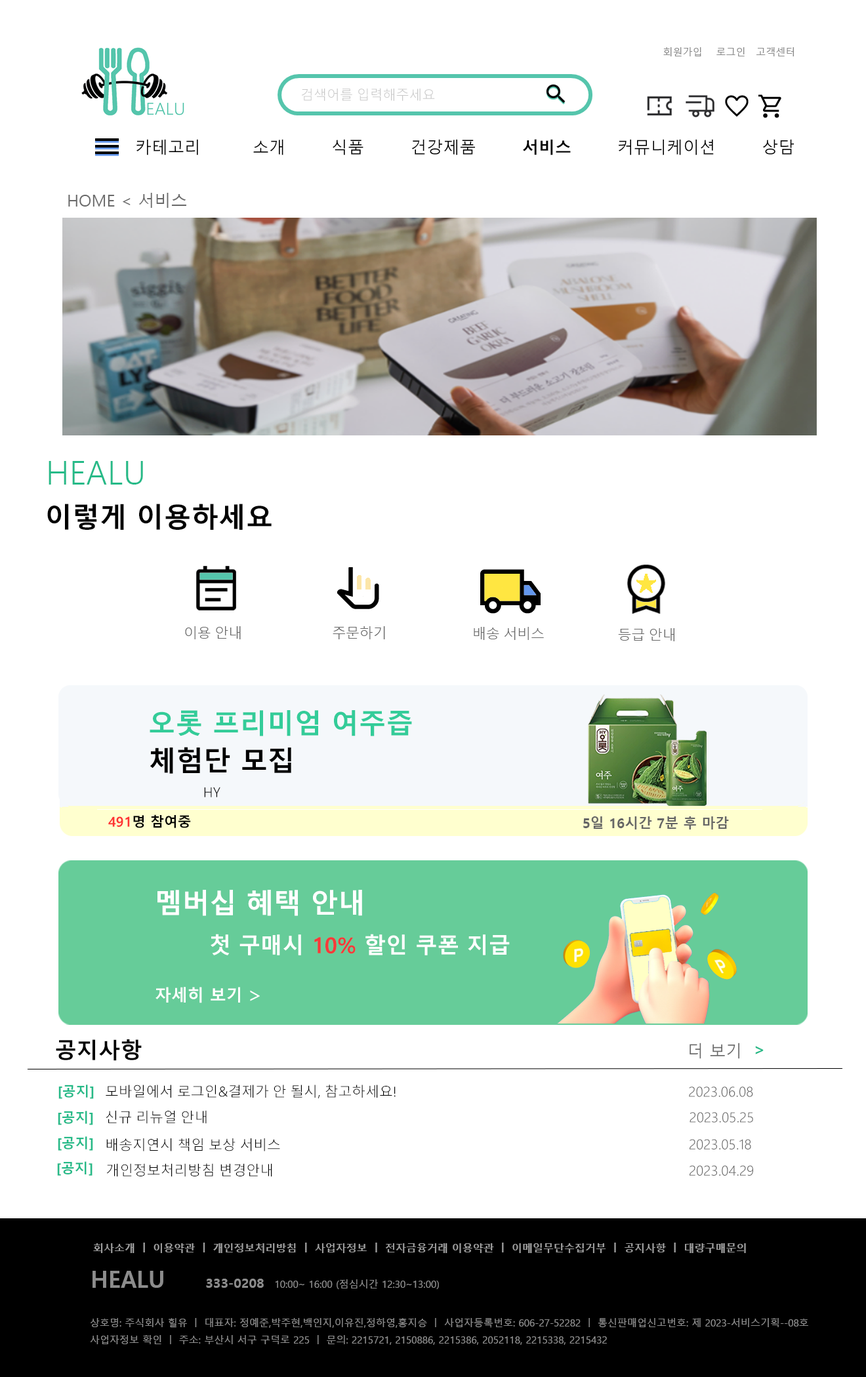
<style>
.page{position:relative;width:866px;height:1377px;background:#ffffff}
.page>*{position:absolute;margin:0}
.t1{font:9.8px "MalgunGothic";color:#8c8c8c}
.t2{font:13.1px "MalgunGothic-Semilight";color:#c8c8c8}
.t3{font:16.4px "MalgunGothic";color:#000000}
.t4{font:16.4px "MalgunGothicBold";color:#000000}
.t5{font:16.4px "MalgunGothic";color:#696969}
.t6{font:32.8px "MalgunGothic-Semilight";color:#26ba88}
.t7{font:27.3px "MalgunGothicBold";color:#000000}
.t8{font:13.7px "MalgunGothic-Semilight";color:#696969}
.t9{font:27.3px "MalgunGothicBold";color:#33cc99}
.t10{font:13.7px "MalgunGothic-Semilight";color:#000000}
.t11{font:13.7px "MalgunGothicBold";color:#000000}
.t12{font:13.7px "MalgunGothicBold";color:#ff3333}
.t13{font:13.7px "MalgunGothicBold";color:#666666}
.t14{font:27.3px "MalgunGothicBold";color:#ffffff}
.t15{font:21.9px "MalgunGothicBold";color:#ffffff}
.t16{font:21.9px "MalgunGothicBold";color:#f53a3a}
.t17{font:16.4px "MalgunGothicBold";color:#ffffff}
.t18{font:21.9px "MalgunGothic";color:#ffffff}
.t19{font:21.9px "MalgunGothicBold";color:#000000}
.t20{font:16.4px "MalgunGothicBold";color:#26ba88}
.t21{font:13.7px "MalgunGothicBold";color:#26ba88}
.t22{font:10.5px "MalgunGothicBold";color:#9d9d9d}
.t23{font:23px "MalgunGothicBold";color:#8c8c8c}
.t24{font:13.1px "MalgunGothicBold";color:#8c8c8c}
</style>
<div class="page">
<p class="t1" style="left:663px;top:47px;width:131px;height:9px">회원가입    로그인   고객센터</p>
<p class="t2" style="left:301px;top:88px;width:134px;height:13px">검색어를 입력해주세요</p>
<p class="t3" style="left:136px;top:139px;width:658px;height:16px">카테고리         소개        식품        건강제품        <span class="t4">서비스</span>        커뮤니케이션        상담</p>
<p class="t5" style="left:68px;top:193px;width:118px;height:15px">HOME &lt; 서비스</p>
<p class="t6" style="left:49px;top:461px;width:94px;height:24px">HEALU</p>
<p class="t7" style="left:47px;top:504px;width:225px;height:26px">이렇게 이용하세요</p>
<p class="t8" style="left:185px;top:626px;width:56px;height:13px">이용 안내</p>
<p class="t8" style="left:333px;top:626px;width:52px;height:13px">주문하기</p>
<p class="t8" style="left:474px;top:627px;width:70px;height:13px">배송 서비스</p>
<p class="t8" style="left:618px;top:628px;width:56px;height:13px">등급 안내</p>
<p class="t9" style="left:150px;top:710px;width:262px;height:27px">오롯 프리미엄 여주즙</p>
<p class="t7" style="left:150px;top:747px;width:141px;height:27px">체험단 모집</p>
<p class="t10" style="left:204px;top:787px;width:16px;height:11px">HY</p>
<p class="t11" style="left:108px;top:815px;width:83px;height:13px"><span class="t12">491</span>명 참여중</p>
<p class="t13" style="left:583px;top:817px;width:146px;height:13px">5일 16시간 7분 후 마감</p>
<p class="t14" style="left:157px;top:890px;width:205px;height:26px">멤버십 혜택 안내</p>
<p class="t15" style="left:211px;top:934px;width:299px;height:22px">첫 구매시 <span class="t16">10%</span> 할인 쿠폰 지급</p>
<p class="t17" style="left:155px;top:987px;width:85px;height:16px">자세히 보기</p>
<p class="t18" style="left:250px;top:990px;width:10px;height:12px">&gt;</p>
<p class="t19" style="left:56px;top:1040px;width:86px;height:21px">공지사항</p>
<p class="t5" style="left:689px;top:1043px;width:50px;height:16px">더 보기</p>
<p class="t20" style="left:755px;top:1046px;width:8px;height:9px">&gt;</p>
<p class="t21" style="left:58px;top:1085px;width:36px;height:14px">[공지]</p>
<p class="t10" style="left:106px;top:1085px;width:289px;height:14px">모바일에서 로그인&amp;결제가 안 될시, 참고하세요!</p>
<p class="t8" style="left:689px;top:1087px;width:64px;height:10px">2023.06.08</p>
<p class="t21" style="left:58px;top:1111px;width:35px;height:14px">[공지]</p>
<p class="t10" style="left:106px;top:1110px;width:101px;height:14px">신규 리뉴얼 안내</p>
<p class="t8" style="left:689px;top:1112px;width:64px;height:11px">2023.05.25</p>
<p class="t21" style="left:58px;top:1137px;width:35px;height:14px">[공지]</p>
<p class="t10" style="left:106px;top:1139px;width:174px;height:13px">배송지연시 책임 보상 서비스</p>
<p class="t8" style="left:689px;top:1139px;width:62px;height:11px">2023.05.18</p>
<p class="t21" style="left:57px;top:1162px;width:35px;height:14px">[공지]</p>
<p class="t10" style="left:106px;top:1164px;width:166px;height:13px">개인정보처리방침 변경안내</p>
<p class="t8" style="left:689px;top:1165px;width:64px;height:11px">2023.04.29</p>
<p class="t22" style="left:93px;top:1243px;width:653px;height:10px">회사소개 ㅣ 이용약관 ㅣ 개인정보처리방침 ㅣ 사업자정보 ㅣ 전자금융거래 이용약관 ㅣ 이메일무단수집거부 ㅣ 공지사항 ㅣ 대량구매문의</p>
<p class="t1" style="left:92px;top:1271px;width:347px;height:18px"><span class="t23">HEALU     </span><span class="t24">333-0208</span>   10:00~ 16:00 (점심시간 12:30~13:00)</p>
<p class="t1" style="left:90px;top:1318px;width:718px;height:27px">상호명: 주식회사 힐유 ㅣ 대표자: 정예준,박주현,백인지,이유진,정하영,홍지승 ㅣ 사업자등록번호: 606-27-52282 ㅣ 통신판매업신고번호: 제 2023-서비스기획--08호<br>사업자정보 확인 ㅣ 주소: 부산시 서구 구덕로 225 ㅣ 문의: 2215721, 2150886, 2215386, 2052118, 2215338, 2215432</p>
</div>
